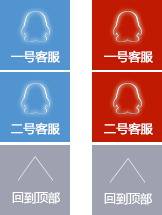
<style>
.page{position:relative;width:162px;height:215px;background:#9da1b0}
.page>*{position:absolute;margin:0}
.t1{font:12px "MicrosoftYaHeiUI";color:#ffffff;font-weight:bold}
</style>
<div class="page">
<p class="t1" style="left:11px;top:50px;width:49px;height:13px">一号客服</p>
<p class="t1" style="left:104px;top:50px;width:49px;height:13px">一号客服</p>
<p class="t1" style="left:11px;top:122px;width:49px;height:13px">二号客服</p>
<p class="t1" style="left:104px;top:122px;width:49px;height:13px">二号客服</p>
</div>
